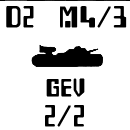
<style>
.page{position:relative;width:130px;height:130px;background:#ffffff}
.page>*{position:absolute;margin:0}
.t1{font:25px "Checkbook";letter-spacing:0.06em;color:#000000;font-weight:bold}
.t2{font:20.8px "Checkbook";letter-spacing:0.06em;color:#000000;font-weight:bold}
</style>
<div class="page">
<p class="t1" style="left:6px;top:5px;width:28px;height:22px">D2</p>
<p class="t1" style="left:60px;top:5px;width:67px;height:22px">M4/3</p>
<p class="t2" style="left:46px;top:77px;width:39px;height:19px">GEV</p>
<p class="t1" style="left:45px;top:104px;width:39px;height:22px">2/2</p>
</div>
